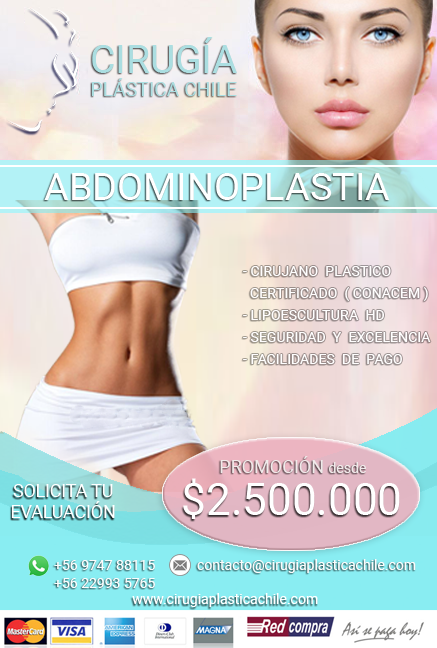
<style>
.page{position:relative;width:437px;height:648px}
.page>*{position:absolute;margin:0}
.t1{font:19.4px "Roboto-Regular";color:#abdee1}
.t2{font:38.8px "Roboto-Regular";color:#abdee1}
.t3{font:38px "Roboto-Regular";color:#ffffff}
.t4{font:14px/22px "Roboto-Regular";letter-spacing:0.005em;color:#fffefe}
.t5{font:18px "Roboto-Regular";color:#f0eaea}
.t6{font:14px "Roboto-Regular";color:#f0eaea}
.t7{font:18px "Roboto-Regular";letter-spacing:-0.01em;color:#ffffff}
.t8{font:44px "Roboto-Regular";color:#ffffff}
.t9{font:14px/18px "Roboto-Regular";color:#fcfcfc}
.t10{font:14px "Roboto-Regular";color:#fcfcfc}
.t11{font:14px "Roboto-Regular";color:#ffffff}
</style>
<div class="page">
<p class="t1" style="left:91px;top:37px;width:146px;height:59px;text-align:center"><span class="t2">CIRUGÍA<br></span>PLÁSTICA CHILE</p>
<p class="t3" style="left:44px;top:173px;width:346px;height:27px">ABDOMINOPLASTIA</p>
<p class="t4" style="left:243px;top:266px;width:188px;height:98px">- CIRUJANO  PLASTICO <br>  CERTIFICADO  ( CONACEM )<br>- LIPOESCULTURA  HD<br>- SEGURIDAD  Y  EXCELENCIA<br>- FACILIDADES  DE  PAGO</p>
<p class="t5" style="left:220px;top:456px;width:146px;height:17px">PROMOCIÓN <span class="t6">desde</span></p>
<p class="t7" style="left:11px;top:484px;width:104px;height:34px;text-align:center">SOLICITA TU<br>EVALUACIÓN</p>
<p class="t8" style="left:183px;top:478px;width:217px;height:41px">$2.500.000</p>
<p class="t9" style="left:54px;top:560px;width:101px;height:28px">+56 9747 88115<br>+56 22993 5765</p>
<p class="t10" style="left:197px;top:559px;width:219px;height:14px">contacto@cirugiaplasticachile.com</p>
<p class="t11" style="left:132px;top:593px;width:186px;height:14px">www.cirugiaplasticachile.com</p>
</div>
